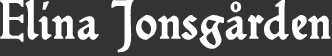
<style>
.page{position:relative;width:332px;height:56px;background:#333333}
.page>*{position:absolute;margin:0}
.t1{font:54.2px "Hamlet-Tertia18";color:#ffffff;font-weight:bold}
</style>
<div class="page">
<p class="t1" style="left:0px;top:0px;width:331px;height:53px">Elina Jonsgarden</p>
</div>
